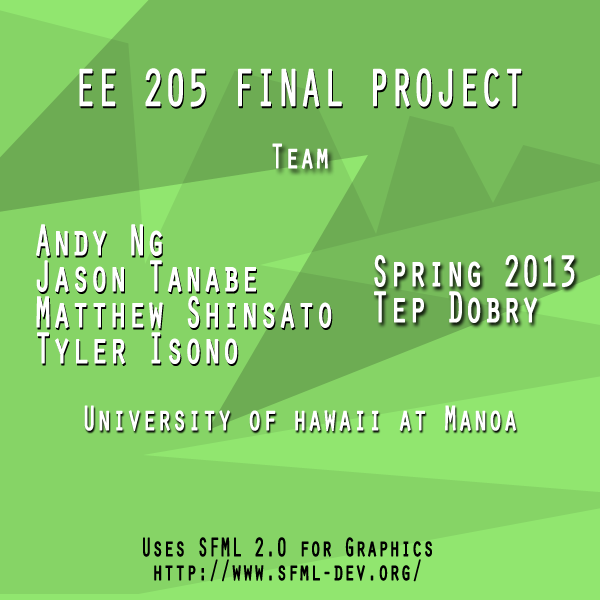
<style>
.page{position:relative;width:600px;height:600px;background:#86d466}
.page>*{position:absolute;margin:0}
.t1{font:54px "OratorStd";color:#ffffff;font-weight:bold;scale:0.67 1}
.t2{font:36px "OratorStd";color:#ffffff;font-weight:bold;scale:0.67 1}
.t3{font:45px/36px "OratorStd";color:#ffffff;font-weight:bold;scale:0.67 1}
.t4{font:27px/24px "OratorStd";color:#000000;font-weight:bold;scale:0.67 1}
</style>
<div class="page">
<p class="t1" style="left:79px;top:68px;width:443px;height:39px">EE 205 FINAL PROJECT</p>
<p class="t2" style="left:272px;top:143px;width:56px;height:26px">Team</p>
<p class="t3" style="left:36px;top:224px;width:296px;height:140px">Andy Ng<br>Jason Tanabe<br>Matthew Shinsato<br>Tyler Isono</p>
<p class="t3" style="left:374px;top:254px;width:201px;height:69px">Spring 2013<br>Tep Dobry</p>
<p class="t2" style="left:84px;top:405px;width:432px;height:26px">University of hawaii at Manoa</p>
<p class="t4" style="left:143px;top:537px;width:289px;height:45px">Uses SFML 2.0 for Graphics<br> http://www.sfml-dev.org/</p>
</div>
